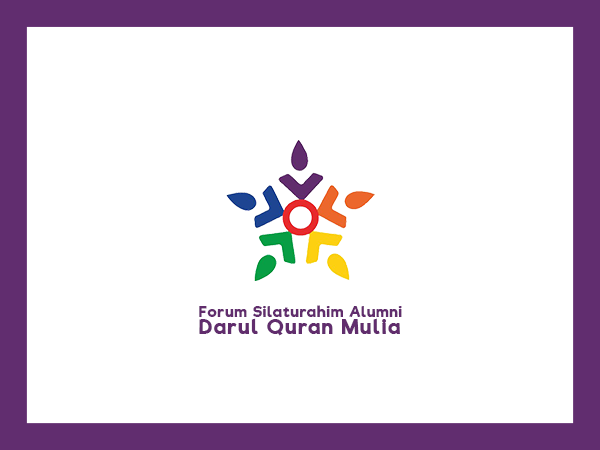
<style>
.page{position:relative;width:600px;height:450px;background:#ffffff}
.page>*{position:absolute;margin:0}
.t1{font:14.6px/17px "FONTSPRINGDEMO-RifficMediumRegular";letter-spacing:0.06em;color:#612d6d}
.t2{font:19.6px/17px "FONTSPRINGDEMO-RifficMediumRegular";letter-spacing:0.08em;color:#612d6d}
</style>
<div class="page">
<p class="t1" style="left:199px;top:305px;width:203px;height:31px;text-align:justify">Forum Silaturahim Alumni<br><span class="t2">Darul Quran Mulia</span></p>
</div>
